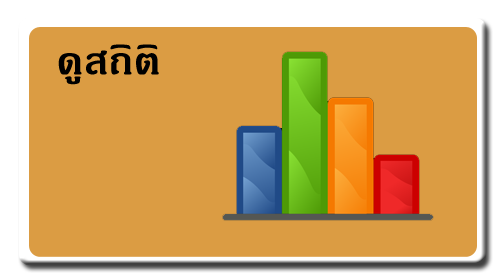
<style>
.page{position:relative;width:500px;height:280px;background:#db9c43}
.page>*{position:absolute;margin:0}
.t1{font:53.1px "JasmineUPCBold";color:#000000}
</style>
<div class="page">
<p class="t1" style="left:58px;top:44px;width:101px;height:41px">ดูสถิติ</p>
</div>
